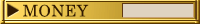
<style>
.page{position:relative;width:200px;height:24px}
.page>*{position:absolute;margin:0}
.t1{font:16px "CenturySchoolbook";letter-spacing:0.025em;color:#321a02}
</style>
<div class="page">
<p class="t1" style="left:23px;top:4px;width:66px;height:13px">MONEY</p>
</div>
